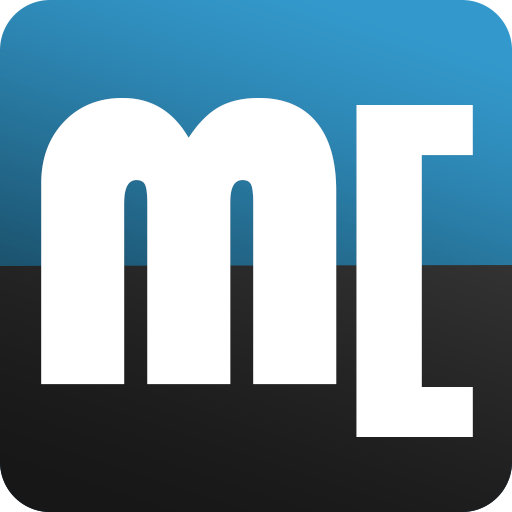
<style>
.page{position:relative;width:512px;height:512px;background:#ffffff}
.page>*{position:absolute;margin:0}
.t1{font:417.6px "Bauhaus93";letter-spacing:-0.05em;color:#ffffff}
</style>
<div class="page">
<p class="t1" style="left:41px;top:98px;width:432px;height:339px">M[</p>
</div>
